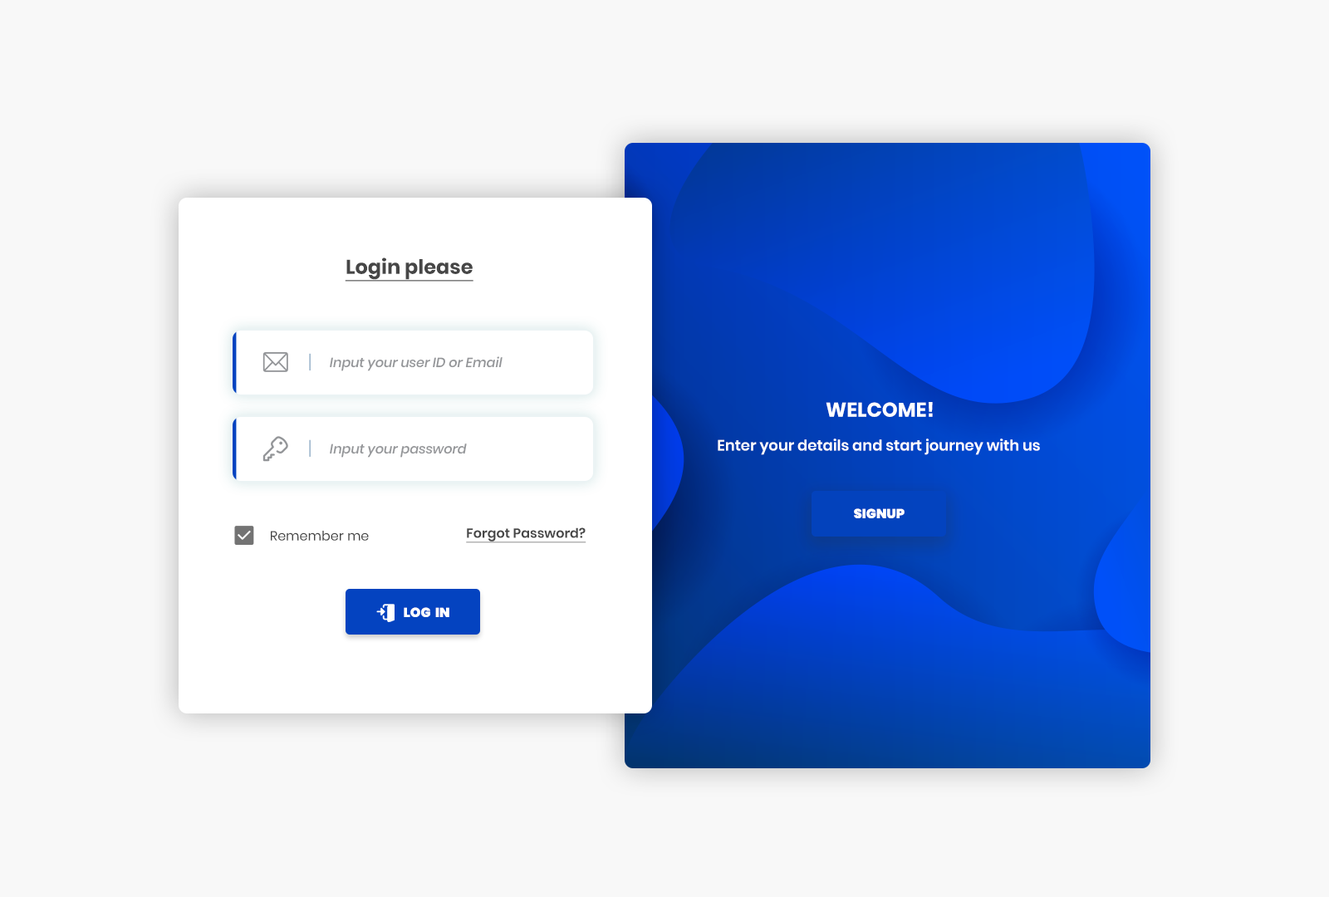
<style>
.page{position:relative;width:1329px;height:897px;background:#f8f8f8}
.page>*{position:absolute;margin:0}
.t1{font:19.9px "Poppins-Bold";color:#464646;text-decoration:underline}
.t2{font:13.3px "Poppins-MediumItalic";color:#939598}
.t3{font:19.9px "Poppins-Bold";color:#ffffff;text-transform:uppercase}
.t4{font:15px "Poppins-SemiBold";color:#ffffff}
.t5{font:13.3px "Poppins-Black";color:#ffffff}
.t6{font:13.3px "Poppins-Regular";color:#464646}
.t7{font:13.3px "Poppins-SemiBold";color:#464646;text-decoration:underline}
</style>
<div class="page">
<p class="t1" style="left:345px;top:258px;width:128px;height:24px">Login please</p>
<p class="t2" style="left:330px;top:356px;width:173px;height:15px">Input your user ID or Email</p>
<p class="t3" style="left:826px;top:402px;width:107px;height:15px">welcome!</p>
<p class="t2" style="left:330px;top:444px;width:137px;height:14px">Input your password</p>
<p class="t4" style="left:718px;top:439px;width:322px;height:16px">Enter your details and start journey with us</p>
<p class="t5" style="left:854px;top:508px;width:51px;height:10px">SIGNUP</p>
<p class="t6" style="left:271px;top:531px;width:98px;height:10px">Remember me</p>
<p class="t7" style="left:466px;top:527px;width:120px;height:16px">Forgot Password?</p>
<p class="t5" style="left:404px;top:607px;width:45px;height:10px">LOG  IN</p>
</div>
